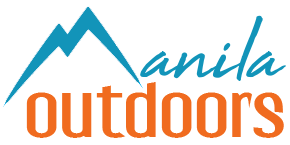
<style>
.page{position:relative;width:290px;height:145px;background:#ffffff}
.page>*{position:absolute;margin:0}
.t1{font:100.8px "HighTide";color:#1294b9}
.t2{font:71.7px "LibelSuit-Regular";color:#f06b1f;scale:1.35 1}
</style>
<div class="page">
<p class="t1" style="left:140px;top:15px;width:146px;height:66px">anila</p>
<p class="t2" style="left:26px;top:82px;width:258px;height:56px">outdoors</p>
</div>
